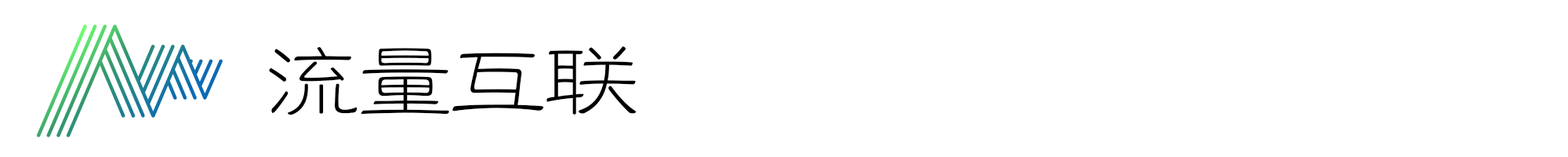
<style>
.page{position:relative;width:1568px;height:157px;background:#ffffff}
.page>*{position:absolute;margin:0}
.t1{font:93.9px "Jtiejinlisu";letter-spacing:-0.01em;color:#000000}
</style>
<div class="page">
<p class="t1" style="left:269px;top:46px;width:368px;height:69px">流量互联</p>
</div>
